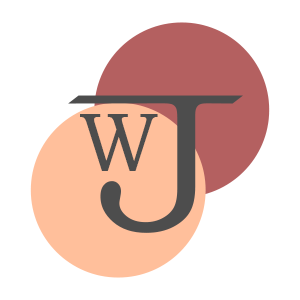
<style>
.page{position:relative;width:300px;height:300px;background:#ffffff}
.page>*{position:absolute;margin:0}
.t1{font:82.8px "BookmanOldStyle";color:#4d4d4d;text-transform:uppercase}
</style>
<div class="page">
<p class="t1" style="left:80px;top:114px;width:78px;height:57px">w</p>
</div>
